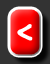
<style>
.page{position:relative;width:50px;height:64px;background:#333333}
.page>*{position:absolute;margin:0}
.t1{font:36.8px "SegoeMarker";color:#ffffff;font-weight:bold}
</style>
<div class="page">
<p class="t1" style="left:17px;top:24px;width:16px;height:17px">&lt;</p>
</div>
